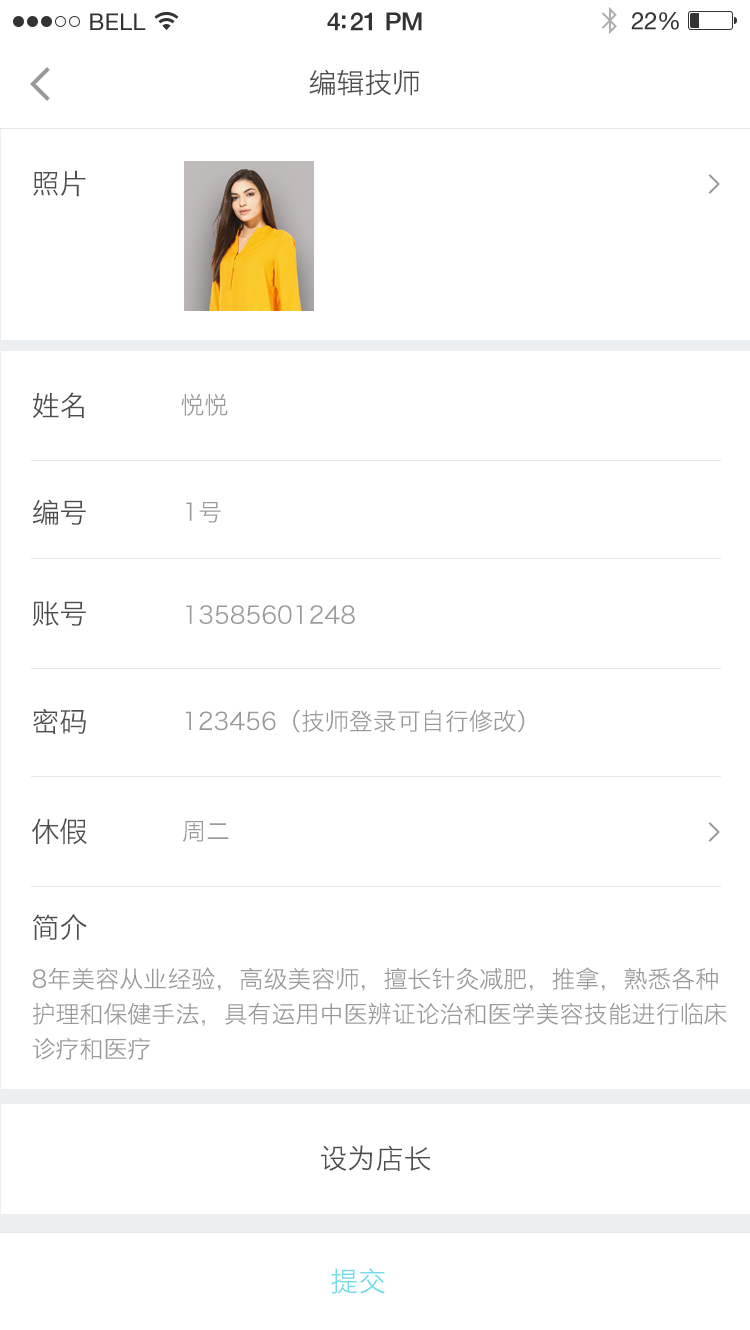
<style>
.page{position:relative;width:750px;height:1330px;background:#ffffff}
.page>*{position:absolute;margin:0}
.t1{font:28px "HiraginoSansGB-W3";color:#4d4d4d}
.t2{font:28px "HiraginoSansGB-W3";color:#4c4c4c}
.t3{font:24px "HiraginoSansGB-W3";color:#999999}
.t4{font:24px/35px "HiraginoSansGB-W3";color:#999999}
.t5{font:28px "HiraginoSansGB-W3";color:#73dce6}
</style>
<div class="page">
<p class="t1" style="left:309px;top:69px;width:111px;height:27px">编辑技师</p>
<p class="t1" style="left:33px;top:170px;width:53px;height:27px">照片</p>
<p class="t2" style="left:32px;top:392px;width:52px;height:26px">姓名</p>
<p class="t3" style="left:181px;top:394px;width:47px;height:22px">悦悦</p>
<p class="t2" style="left:32px;top:499px;width:54px;height:26px">编号</p>
<p class="t3" style="left:186px;top:502px;width:35px;height:21px">1号</p>
<p class="t1" style="left:32px;top:601px;width:54px;height:25px">账号</p>
<p class="t3" style="left:186px;top:605px;width:169px;height:19px">13585601248</p>
<p class="t1" style="left:33px;top:708px;width:53px;height:26px">密码</p>
<p class="t3" style="left:185px;top:710px;width:340px;height:23px">123456（技师登录可自行修改）</p>
<p class="t1" style="left:32px;top:818px;width:55px;height:27px">休假</p>
<p class="t3" style="left:182px;top:821px;width:47px;height:21px">周二</p>
<p class="t2" style="left:32px;top:914px;width:55px;height:26px">简介</p>
<p class="t4" style="left:32px;top:967px;width:695px;height:93px;text-align:justify">8年美容从业经验，高级美容师，擅长针灸减肥，推拿，熟悉各种<br>护理和保健手法，具有运用中医辨证论治和医学美容技能进行临床<br>诊疗和医疗</p>
<p class="t1" style="left:321px;top:1145px;width:110px;height:26px">设为店长</p>
<p class="t5" style="left:331px;top:1268px;width:54px;height:26px">提交</p>
</div>
